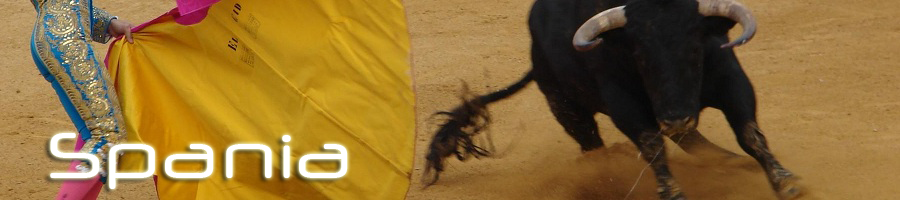
<style>
.page{position:relative;width:900px;height:200px}
.page>*{position:absolute;margin:0}
.t1{font:64px "NeuropolXFree";color:#ffffff}
</style>
<div class="page">
<p class="t1" style="left:50px;top:133px;width:298px;height:56px">Spania</p>
</div>
